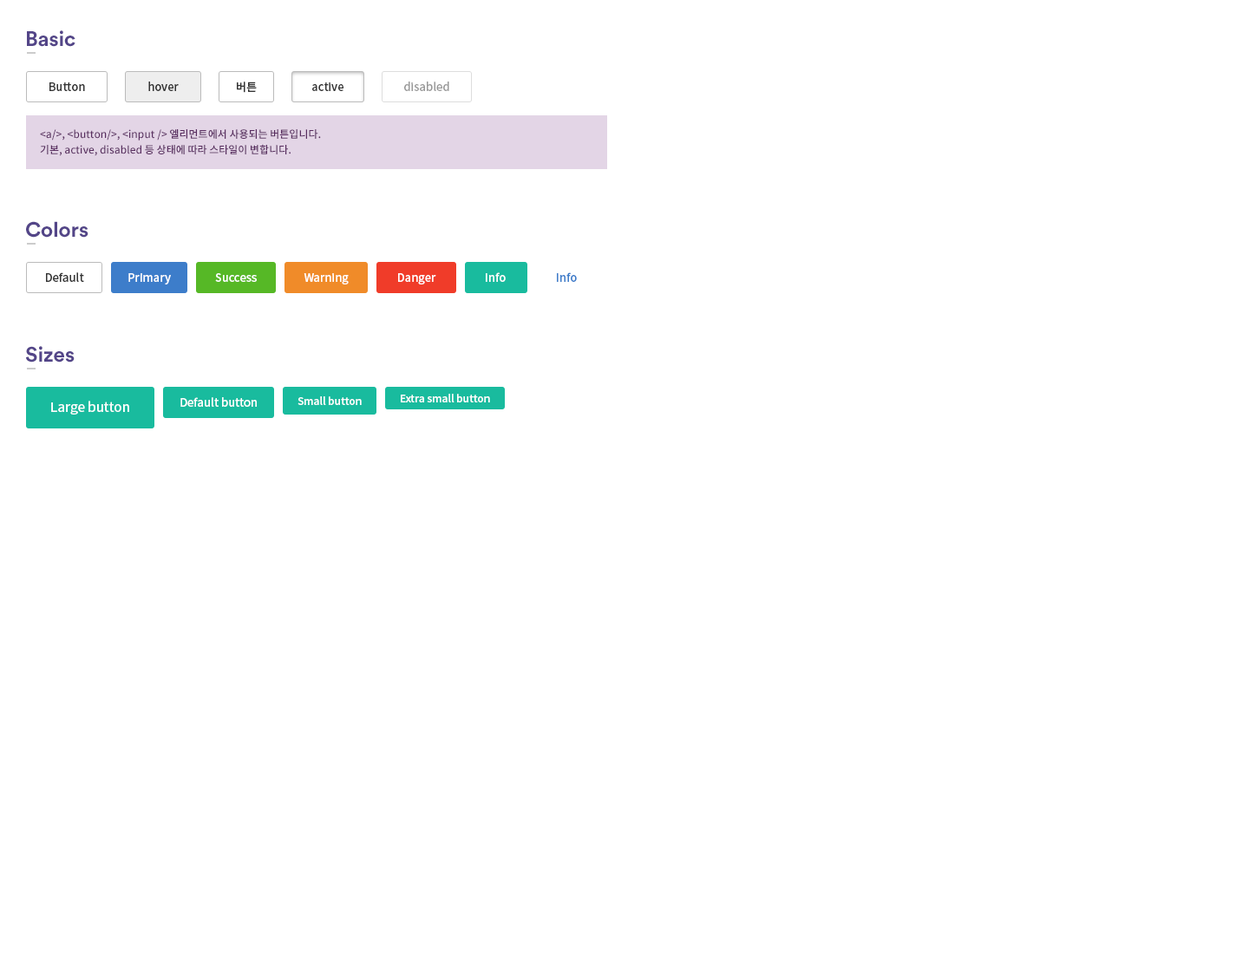
<style>
.page{position:relative;width:1249px;height:954px;background:#ffffff}
.page>*{position:absolute;margin:0}
.t1{font:20.8px "CircularStd-Bold";color:#534588}
.t2{font:11.3px "SourceHanSansKR-Medium";color:#333333}
.t3{font:11.3px "SourceHanSansKR-Medium";color:#999999}
.t4{font:10.4px/15.6px "SourceHanSansKR-Medium";color:#582c5f}
.t5{font:11.3px "SourceHanSansKR-Medium";color:#ffffff}
.t6{font:11.3px "SourceHanSansKR-Medium";color:#3d7dca}
.t7{font:13px "SourceHanSansKR-Medium";color:#ffffff}
.t8{font:10.4px "SourceHanSansKR-Medium";color:#ffffff}
</style>
<div class="page">
<p class="t1" style="left:27px;top:30px;width:48px;height:17px">Basic</p>
<p class="t2" style="left:49px;top:82px;width:36px;height:9px">Button</p>
<p class="t2" style="left:148px;top:82px;width:31px;height:9px">hover</p>
<p class="t2" style="left:237px;top:82px;width:20px;height:11px">버튼</p>
<p class="t2" style="left:312px;top:82px;width:32px;height:9px">active</p>
<p class="t3" style="left:404px;top:82px;width:45px;height:9px">disabled</p>
<p class="t4" style="left:40px;top:129px;width:281px;height:27px">&lt;a/&gt;, &lt;button/&gt;, &lt;input /&gt; 엘리먼트에서 사용되는 버튼입니다.<br>기본, active, disabled 등 상태에 따라 스타일이 변합니다.</p>
<p class="t1" style="left:26px;top:221px;width:62px;height:17px">Colors</p>
<p class="t2" style="left:46px;top:272px;width:38px;height:10px">Default</p>
<p class="t5" style="left:128px;top:273px;width:43px;height:12px">Primary</p>
<p class="t5" style="left:215px;top:273px;width:42px;height:9px">Success</p>
<p class="t5" style="left:304px;top:273px;width:45px;height:12px">Warning</p>
<p class="t5" style="left:398px;top:273px;width:38px;height:12px">Danger</p>
<p class="t5" style="left:486px;top:272px;width:20px;height:10px">Info</p>
<p class="t6" style="left:557px;top:272px;width:20px;height:10px">Info</p>
<p class="t1" style="left:26px;top:346px;width:49px;height:17px">Sizes</p>
<p class="t7" style="left:51px;top:401px;width:78px;height:14px">Large button</p>
<p class="t5" style="left:180px;top:397px;width:77px;height:10px">Default button</p>
<p class="t8" style="left:298px;top:397px;width:64px;height:8px">Small button</p>
<p class="t8" style="left:401px;top:394px;width:89px;height:9px">Extra small button</p>
</div>
